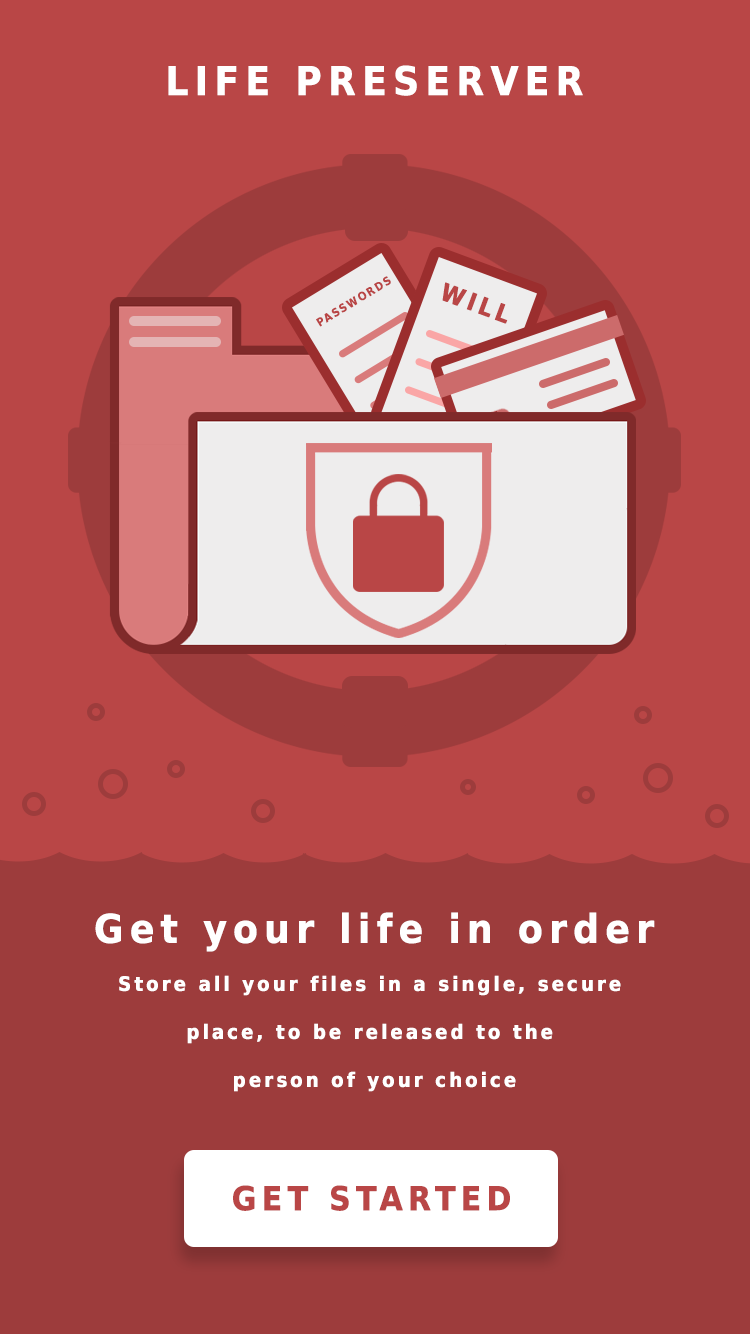
<style>
.page{position:relative;width:750px;height:1334px;background:#b94646}
.page>*{position:absolute;margin:0}
.t1{font:39.6px "DejaVuSans-Bold";letter-spacing:0.15em;color:#ffffff;font-weight:bold;scale:0.91 1}
.t2{font:11px "DejaVuSans-Bold";letter-spacing:0.15em;color:#b94646;font-weight:bold;scale:0.91 1}
.t3{font:24.1px "DejaVuSans-Bold";letter-spacing:0.15em;color:#b94646;font-weight:bold;scale:0.91 1}
.t4{font:19.8px/48px "DejaVuSans-Bold";letter-spacing:0.15em;color:#ffffff;font-weight:bold;scale:0.91 1}
.t5{font:33px "DejaVuSans-Bold";letter-spacing:0.15em;color:#b94646;font-weight:bold;scale:0.91 1}
</style>
<div class="page">
<p class="t1" style="left:168px;top:65px;width:415px;height:31px">LIFE PRESERVER</p>
<p class="t2" style="left:316px;top:276px;width:75px;height:51px;rotate:-31deg">PASSWORDS</p>
<p class="t3" style="left:442px;top:282px;width:66px;height:42px;rotate:20deg">WILL</p>
<p class="t4" style="left:95px;top:912px;width:560px;height:180px;text-align:center"><span class="t1">Get your life in order<br></span>Store all your files in a single, secure <br>place, to be released to the <br>person of your choice</p>
<p class="t5" style="left:233px;top:1185px;width:277px;height:26px">GET STARTED</p>
</div>
